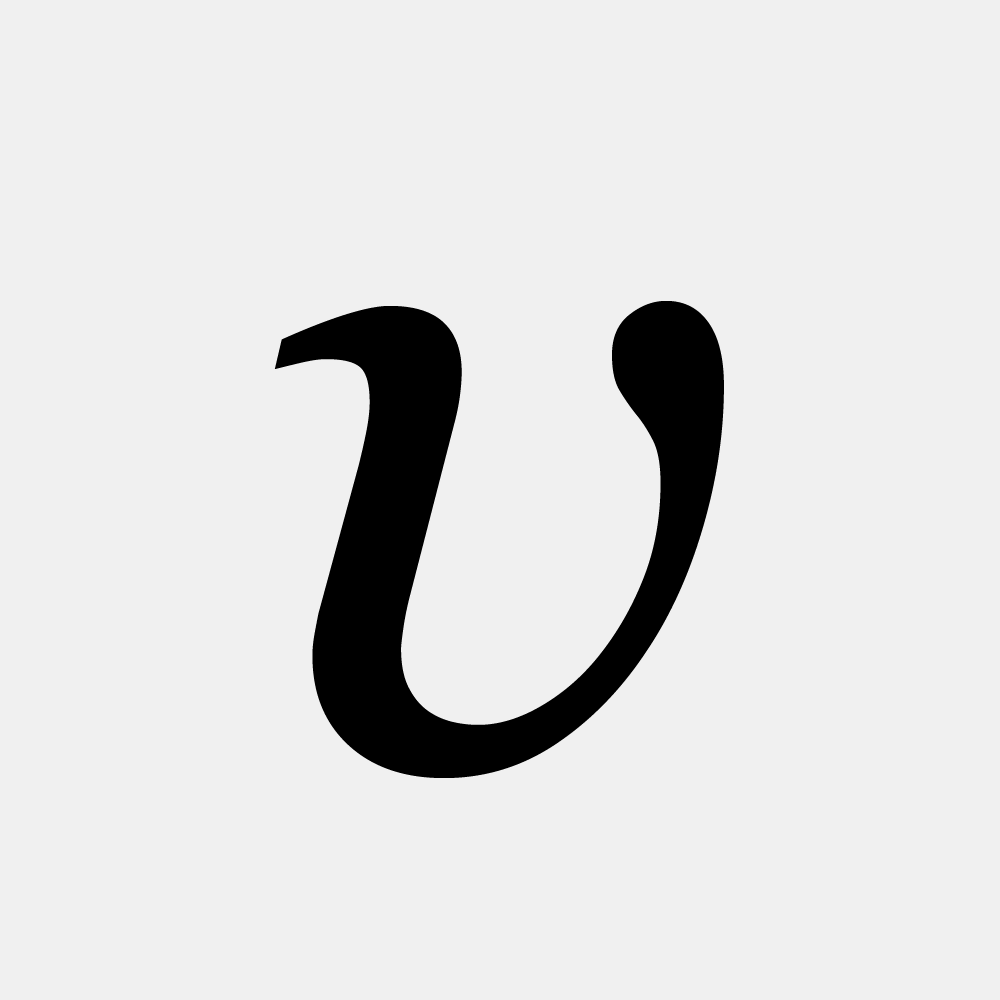
<style>
.page{position:relative;width:1000px;height:1000px;background:#f0f0f0}
.page>*{position:absolute;margin:0}
.t1{font:937.5px "Georgia-Italic";color:#000000}
</style>
<div class="page">
<p class="t1" style="left:274px;top:301px;width:450px;height:477px">v</p>
</div>
